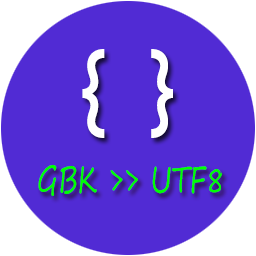
<style>
.page{position:relative;width:256px;height:256px;background:#512bd4}
.page>*{position:absolute;margin:0}
.t1{font:90px "Sarasa-Mono-Slab-SC-Bold";color:#ffffff;scale:0.75 1}
.t2{font:36px "SegoePrint";color:#00ff01;scale:0.75 1}
</style>
<div class="page">
<p class="t1" style="left:82px;top:49px;width:91px;height:89px">{ }</p>
<p class="t2" style="left:38px;top:165px;width:184px;height:31px">GBK &gt;&gt; UTF8</p>
</div>
